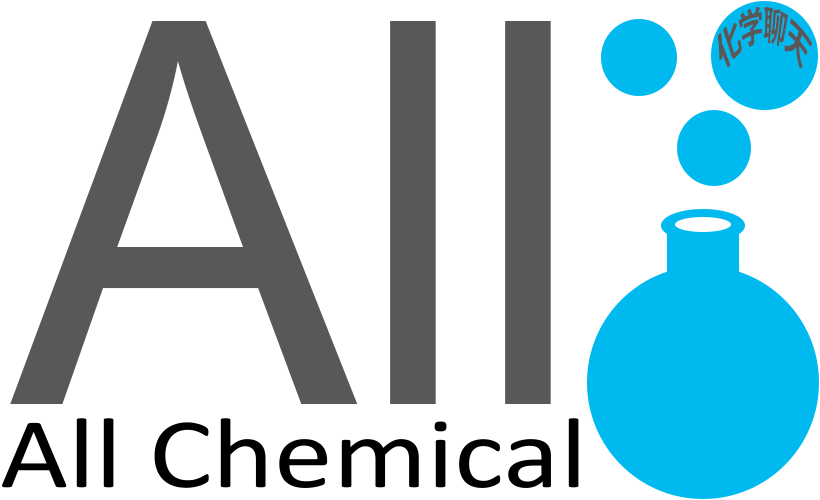
<style>
.page{position:relative;width:820px;height:500px;background:#ffffff}
.page>*{position:absolute;margin:0}
.t1{font:39.1px "Meiryo-Bold";color:#585858;scale:0.45 1}
.t2{font:534.6px "ArialMT";color:#585858;scale:0.97 1}
.t3{font:101.4px "Calibri";color:#000000;scale:1.16 1}
</style>
<div class="page">
<p class="t1" style="left:717px;top:6px;width:96px;height:63px">化学聊天</p>
<p class="t2" style="left:10px;top:21px;width:541px;height:383px">All</p>
<p class="t3" style="left:2px;top:418px;width:577px;height:70px">All Chemical</p>
</div>
